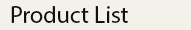
<style>
.page{position:relative;width:191px;height:30px;background:#f3f1e9}
.page>*{position:absolute;margin:0}
.t1{font:24px "MyriadPro-Regular";color:#111111}
</style>
<div class="page">
<p class="t1" style="left:11px;top:6px;width:117px;height:17px">Product List</p>
</div>
